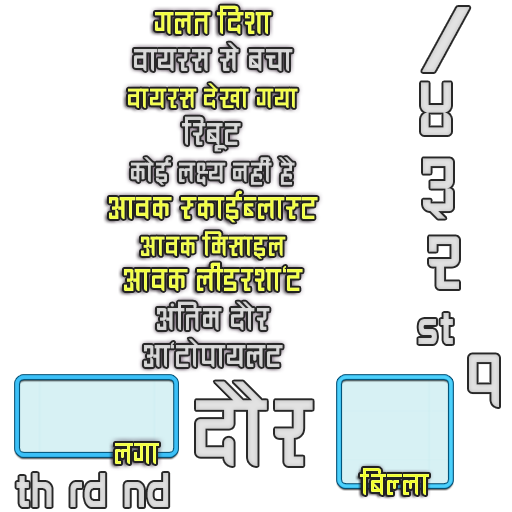
<style>
.page{position:relative;width:512px;height:512px;background:#ffffff}
.page>*{position:absolute;margin:0}
.t1{font:50px "Ananda-Devanagari-NP";letter-spacing:0.03em;color:#f4ff50}
.t2{font:50px "Ananda-Devanagari-NP";letter-spacing:0.03em;color:#d5d5d5}
.t3{font:44px "Ananda-Devanagari-NP";letter-spacing:0.03em;color:#f4ff50}
.t4{font:50px "Ananda-Devanagari-NP";letter-spacing:0.03em;color:#d4d4d4}
.t5{font:44px "Ananda-Devanagari-NP";letter-spacing:0.03em;color:#d3d3d3}
.t6{font:47.3px "Prototype";letter-spacing:0.03em;color:#d8d8d8;scale:0.87 1}
.t7{font:48px "Ananda-Devanagari-NP";letter-spacing:0.03em}
</style>
<div class="page">
<p class="t1" style="left:155px;top:5px;width:117px;height:29px">unt lbzf</p>
<p class="t2" style="left:134px;top:42px;width:159px;height:29px">jfo/; ;] arf</p>
<p class="t3" style="left:128px;top:83px;width:170px;height:25px">jfo/; b]vf uof</p>
<p class="t4" style="left:182px;top:116px;width:59px;height:36px">l/a"6</p>
<p class="t5" style="left:131px;top:157px;width:164px;height:28px">sf]O{ nIo gxL+ x}</p>
<p class="t1" style="left:109px;top:190px;width:209px;height:33px">cfjs :sfO{Anf:6</p>
<p class="t3" style="left:141px;top:231px;width:145px;height:28px">cfjs ld;fOn</p>
<p class="t1" style="left:124px;top:262px;width:179px;height:29px">cfjs nL8/zf‘6</p>
<p class="t4" style="left:157px;top:301px;width:113px;height:29px">c+ltd bf}/</p>
<p class="t6" style="left:418px;top:313px;width:35px;height:31px">st</p>
<p class="t4" style="left:144px;top:338px;width:139px;height:29px">cf‘6f]kfon6</p>
<p class="t7" style="left:115px;top:443px;width:44px;height:21px">nuf</p>
<p class="t6" style="left:16px;top:473px;width:36px;height:34px">th</p>
<p class="t7" style="left:360px;top:468px;width:69px;height:27px">laNnf</p>
</div>
